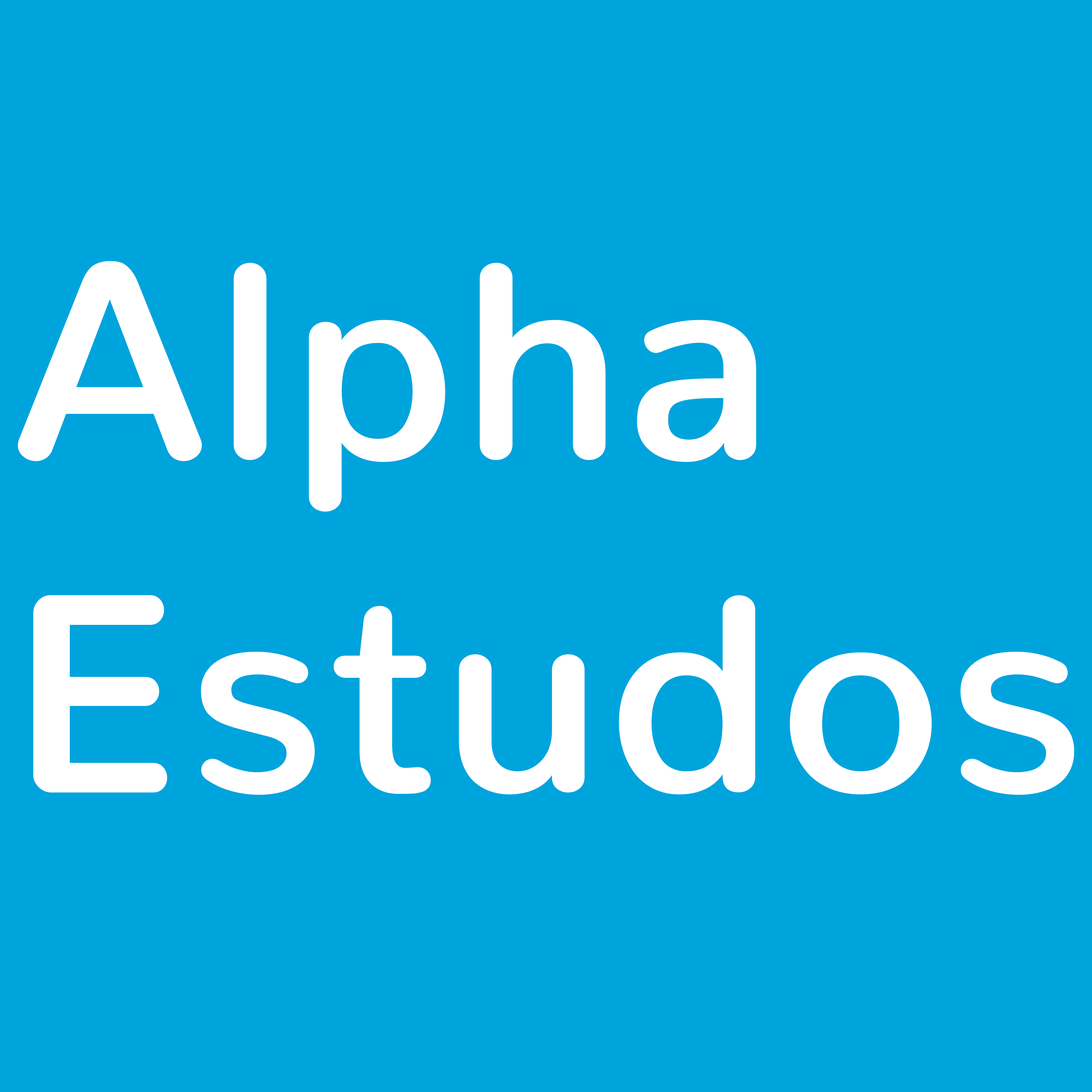
<style>
.page{position:relative;width:1092px;height:1092px;background:#00a4dd}
.page>*{position:absolute;margin:0}
.t1{font:277.2px "Nunito-SemiBold";color:#ffffff;font-weight:bold}
</style>
<div class="page">
<p class="t1" style="left:18px;top:261px;width:1056px;height:534px">Alpha<br>Estudos</p>
</div>
